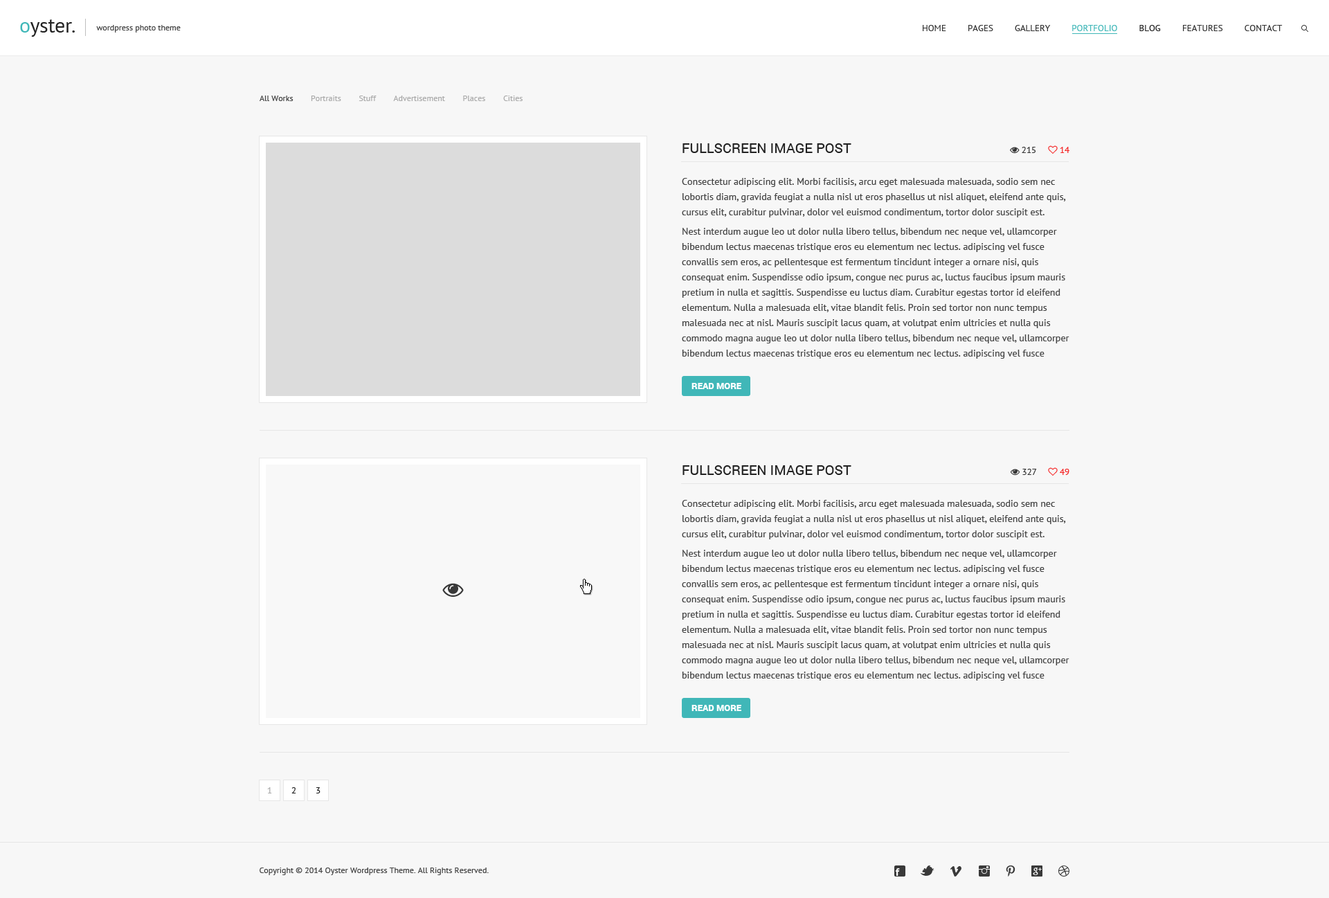
<style>
.page{position:relative;width:1329px;height:898px;background:#f7f7f7}
.page>*{position:absolute;margin:0}
.t1{font:8.3px "PTSans-Regular";color:#434343}
.t2{font:9px "PTSans-Regular";color:#343434;text-transform:uppercase}
.t3{font:9px "PTSans-Regular";color:#40b7b8;text-transform:uppercase}
.t4{font:9px "PTSans-Regular";color:#222222;text-transform:uppercase}
.t5{font:8.3px "PTSans-Regular";color:#aaaaaa}
.t6{font:8.3px "PTSans-Regular";color:#444444}
.t7{font:13.8px "Roboto-Regular";color:#222222;text-transform:uppercase}
.t8{font:9.7px/15.2px "PTSans-Regular";color:#444444}
.t9{font:9.7px/19.4px "PTSans-Regular";color:#444444}
.t10{font:9px "Roboto-Black";color:#ffffff;text-transform:uppercase}
.t11{font:9px "PTSans-Regular";color:#aaaaaa;text-transform:uppercase}
</style>
<div class="page">
<p class="t1" style="left:96px;top:25px;width:85px;height:8px">wordpress photo theme</p>
<p class="t2" style="left:923px;top:25px;width:360px;height:6px">Home         Pages         Gallery         <span class="t3">Portfolio         </span><span class="t4">Blog         </span>Features         Contact</p>
<p class="t5" style="left:260px;top:96px;width:263px;height:5px"><span class="t6">All Works        </span>Portraits        Stuff        Advertisement        Places        Cities</p>
<p class="t7" style="left:683px;top:143px;width:169px;height:10px">Fullscreen Image Post</p>
<p class="t8" style="left:682px;top:178px;width:388px;height:181px">Consectetur adipiscing elit. Morbi facilisis, arcu eget malesuada malesuada, sodio sem nec lobortis diam, gravida feugiat a nulla nisl ut eros phasellus ut nisl aliquet, eleifend ante quis, cursus elit, сurabitur pulvinar, dolor vel euismod condimentum, tortor dolor suscipit est.<br><span class="t9">N</span>est interdum augue leo ut dolor nulla libero tellus, bibendum nec neque vel, ullamcorper bibendum lectus maecenas tristique eros eu elementum nec lectus. adipiscing vel fusce convallis sem eros, ac pellentesque est fermentum tincidunt integer a ornare nisi, quis consequat enim. Suspendisse odio ipsum, congue nec purus ac, luctus faucibus ipsum mauris pretium in nulla et sagittis. Suspendisse eu luctus diam. Curabitur egestas tortor id eleifend elementum. Nulla a malesuada elit, vitae blandit felis. Proin sed tortor non nunc tempus malesuada nec at nisl. Mauris suscipit lacus quam, at volutpat enim ultricies et nulla quis commodo magna augue leo ut dolor nulla libero tellus, bibendum nec neque vel, ullamcorper bibendum lectus maecenas tristique eros eu elementum nec lectus. adipiscing vel fusce convallis sem eros, ac pellentesque est fermentum tincidunt integer a ornare nisi, quis consequat enim. Suspendisse odio ipsum, congue nec purus ac, luctus fa.</p>
<p class="t10" style="left:692px;top:383px;width:49px;height:6px">Read More</p>
<p class="t7" style="left:683px;top:465px;width:169px;height:10px">Fullscreen Image Post</p>
<p class="t8" style="left:682px;top:500px;width:388px;height:181px">Consectetur adipiscing elit. Morbi facilisis, arcu eget malesuada malesuada, sodio sem nec lobortis diam, gravida feugiat a nulla nisl ut eros phasellus ut nisl aliquet, eleifend ante quis, cursus elit, сurabitur pulvinar, dolor vel euismod condimentum, tortor dolor suscipit est.<br><span class="t9">N</span>est interdum augue leo ut dolor nulla libero tellus, bibendum nec neque vel, ullamcorper bibendum lectus maecenas tristique eros eu elementum nec lectus. adipiscing vel fusce convallis sem eros, ac pellentesque est fermentum tincidunt integer a ornare nisi, quis consequat enim. Suspendisse odio ipsum, congue nec purus ac, luctus faucibus ipsum mauris pretium in nulla et sagittis. Suspendisse eu luctus diam. Curabitur egestas tortor id eleifend elementum. Nulla a malesuada elit, vitae blandit felis. Proin sed tortor non nunc tempus malesuada nec at nisl. Mauris suscipit lacus quam, at volutpat enim ultricies et nulla quis commodo magna augue leo ut dolor nulla libero tellus, bibendum nec neque vel, ullamcorper bibendum lectus maecenas tristique eros eu elementum nec lectus. adipiscing vel fusce convallis sem eros, ac pellentesque est fermentum tincidunt integer a ornare nisi, quis consequat enim. Suspendisse odio ipsum, congue nec purus ac, luctus fa.</p>
<p class="t10" style="left:692px;top:705px;width:49px;height:6px">Read More</p>
<p class="t11" style="left:267px;top:787px;width:5px;height:6px">1</p>
<p class="t4" style="left:291px;top:787px;width:5px;height:6px">2</p>
<p class="t4" style="left:316px;top:787px;width:5px;height:6px">3</p>
<p class="t1" style="left:260px;top:867px;width:229px;height:8px">Copyright © 2014 Oyster Wordpress Theme. All Rights Reserved.</p>
</div>
